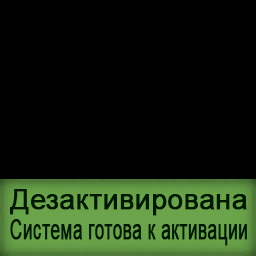
<style>
.page{position:relative;width:256px;height:256px;background:#000000}
.page>*{position:absolute;margin:0}
.t1{font:28px/30px "ArialMT";color:#001800;font-weight:bold;scale:0.62 1}
.t2{font:28px/30px "ArialMT";color:#001800;font-weight:bold}
</style>
<div class="page">
<p class="t1" style="left:10px;top:189px;width:237px;height:57px;text-align:center"><span class="t2">Дезактивирована<br></span>Система готова к активации</p>
</div>
